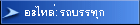
<style>
.page{position:relative;width:140px;height:25px}
.page>*{position:absolute;margin:0}
.t1{font:15.3px "EucrosiaDSE";color:#ffffff;scale:1.12 1}
</style>
<div class="page">
<p class="t1" style="left:25px;top:4px;width:79px;height:15px">ÍÐäËÅè:Ã¶ºÃÃ·Ø¡</p>
</div>
